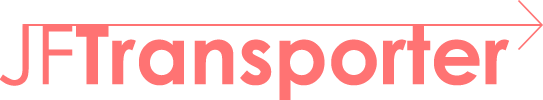
<style>
.page{position:relative;width:543px;height:100px;background:#ffffff}
.page>*{position:absolute;margin:0}
.t1{font:81.5px "CenturyGothic-Bold";color:#ff7373}
.t2{font:81.5px "CenturyGothic";color:#ff7373}
</style>
<div class="page">
<p class="t1" style="left:0px;top:24px;width:509px;height:76px"><span class="t2">JF</span>Transporter</p>
</div>
